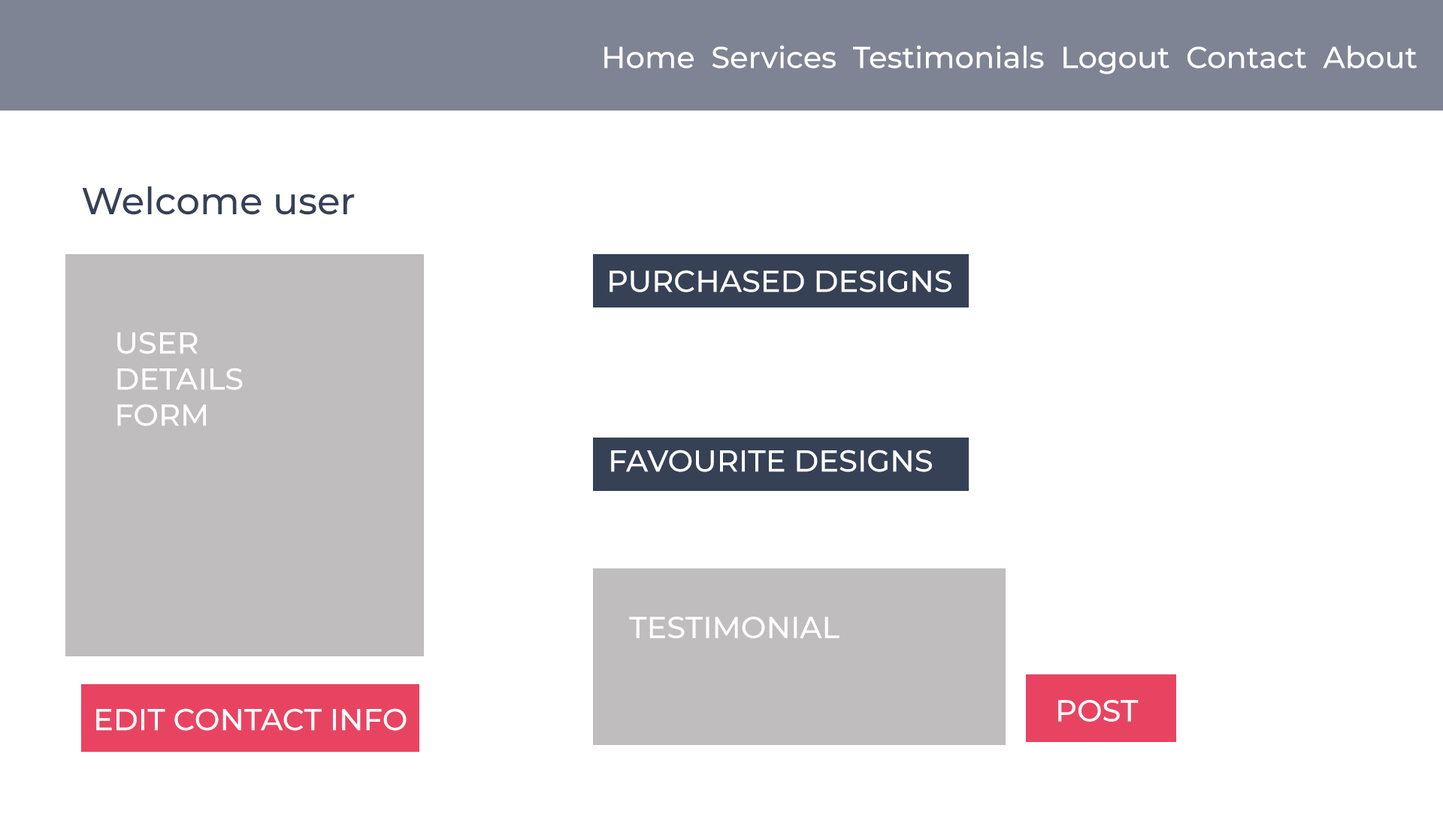
<style>
.page{position:relative;width:1443px;height:827px;background:#ffffff}
.page>*{position:absolute;margin:0}
.t1{font:30.1px "Montserrat-Medium";color:#ffffff}
.t2{font:37.6px "Montserrat-Medium";color:#364156}
</style>
<div class="page">
<p class="t1" style="left:604px;top:45px;width:812px;height:29px">Home  Services  Testimonials  Logout  Contact  About</p>
<p class="t2" style="left:82px;top:186px;width:273px;height:29px">Welcome user</p>
<p class="t1" style="left:609px;top:270px;width:342px;height:22px">PURCHASED DESIGNS</p>
<p class="t1" style="left:117px;top:331px;width:126px;height:95px">USER<br>DETAILS<br>FORM</p>
<p class="t1" style="left:611px;top:449px;width:321px;height:23px">FAVOURITE DESIGNS</p>
<p class="t1" style="left:629px;top:616px;width:210px;height:22px">TESTIMONIAL</p>
<p class="t1" style="left:1058px;top:700px;width:80px;height:21px">POST</p>
<p class="t1" style="left:96px;top:708px;width:311px;height:22px">EDIT CONTACT INFO</p>
</div>
